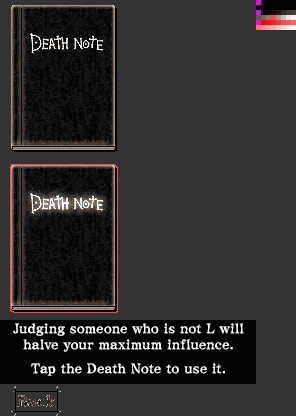
<style>
.page{position:relative;width:296px;height:416px;background:#333333}
.page>*{position:absolute;margin:0}
.t1{font:13.4px/16px "ComicMysteryStd-DB";letter-spacing:0.01em;color:#ffffff}
.t2{font:13.4px/24px "ComicMysteryStd-DB";letter-spacing:0.01em;color:#ffffff}
</style>
<div class="page">
<p class="t1" style="left:13px;top:323px;width:231px;height:53px;text-align:center">Judging someone who is not L will<br>halve your maximum inf luence.<br><span class="t2">Tap the Death Note to use it.</span></p>
</div>
